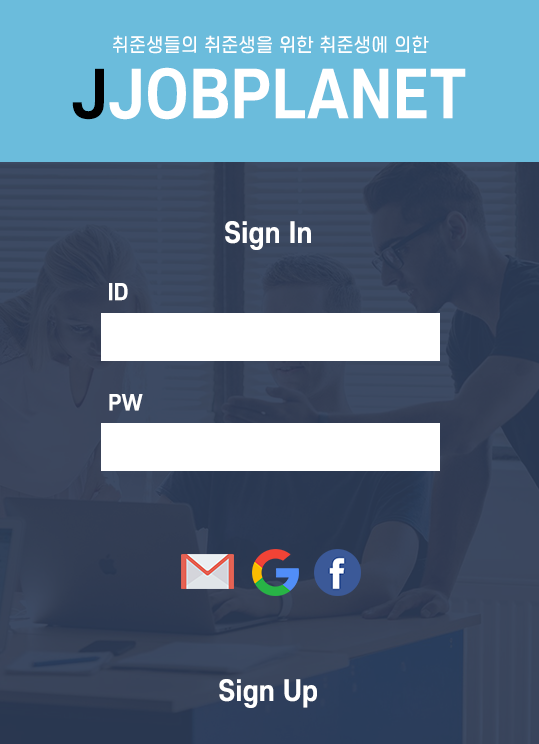
<style>
.page{position:relative;width:539px;height:744px}
.page>*{position:absolute;margin:0}
.t1{font:18.5px "S-CoreDream-4Regular";letter-spacing:0.02em;color:#ffffff;scale:0.96 1}
.t2{font:62.4px "S-CoreDream-6Bold";letter-spacing:0.02em;color:#ffffff;scale:0.96 1}
.t3{font:62.4px "S-CoreDream-6Bold";letter-spacing:0.02em;color:#000000;scale:0.96 1}
.t4{font:27px "S-CoreDream-6Bold";letter-spacing:0.02em;color:#ffffff;scale:0.96 1}
.t5{font:21.4px "S-CoreDream-6Bold";letter-spacing:0.02em;color:#ffffff;scale:0.96 1}
.t6{font:20.5px "S-CoreDream-6Bold";letter-spacing:0.02em;color:#ffffff;scale:0.96 1}
</style>
<div class="page">
<p class="t1" style="left:113px;top:35px;width:316px;height:19px">취준생들의 취준생을 위한 취준생에 의한</p>
<p class="t2" style="left:72px;top:67px;width:394px;height:53px"><span class="t3">J</span>JOBPLANET</p>
<p class="t4" style="left:225px;top:221px;width:86px;height:29px">Sign In</p>
<p class="t5" style="left:109px;top:283px;width:19px;height:18px">ID</p>
<p class="t6" style="left:109px;top:394px;width:34px;height:17px">PW</p>
<p class="t4" style="left:219px;top:679px;width:98px;height:29px">Sign Up</p>
</div>
